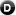
<style>
.page{position:relative;width:16px;height:15px}
.page>*{position:absolute;margin:0}
.t1{font:10px "ArialMT";color:#ffffff;font-weight:bold}
</style>
<div class="page">
<p class="t1" style="left:4px;top:4px;width:7px;height:8px">D</p>
</div>
